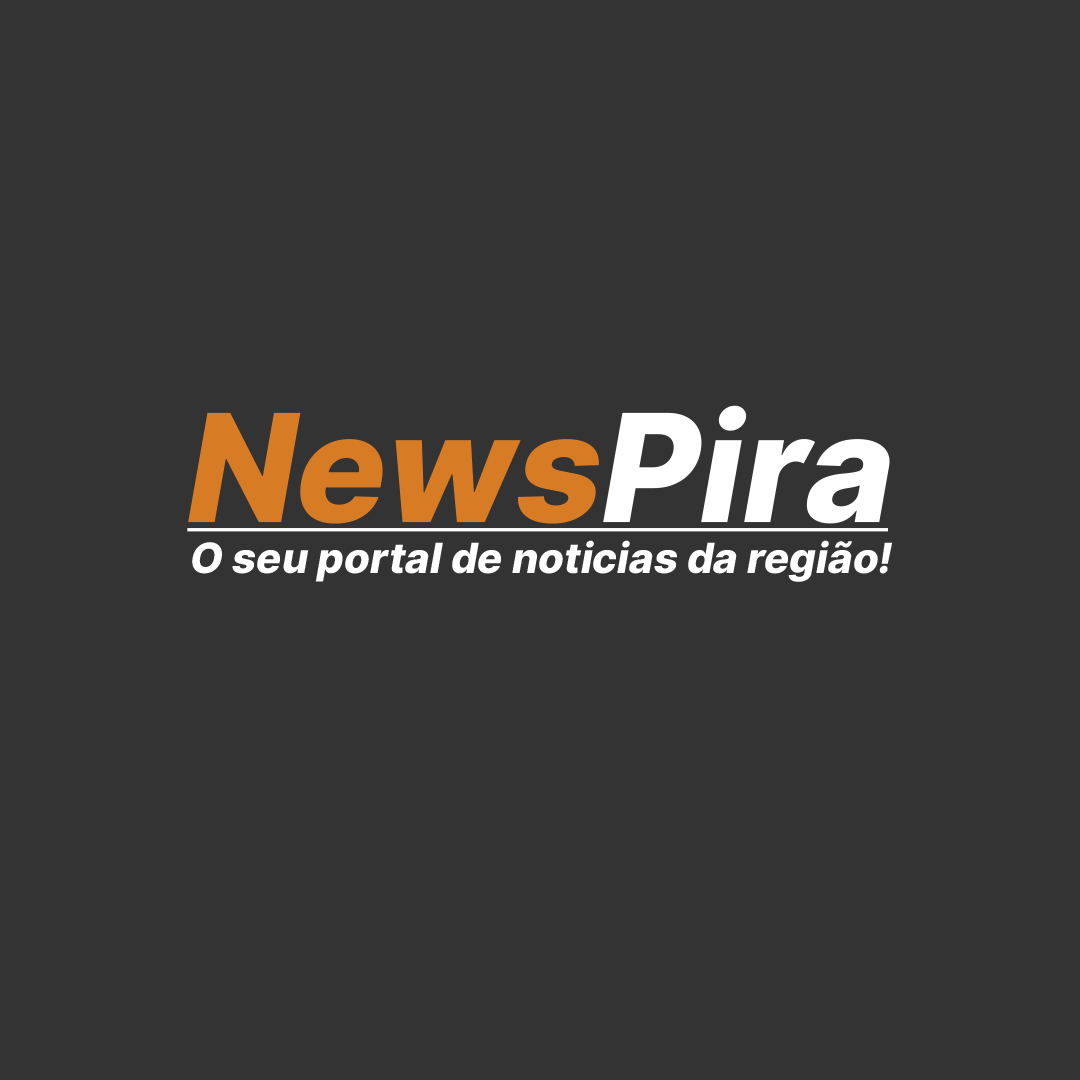
<style>
.page{position:relative;width:1080px;height:1080px;background:#333333}
.page>*{position:absolute;margin:0}
.t1{font:150.2px "Inter-ExtraBold";color:#d87b25;font-style:italic}
.t2{font:150.2px "Inter-ExtraBold";color:#ffffff;font-style:italic}
.t3{font:41.8px "Inter-ExtraBold";color:#ffffff;font-style:italic}
</style>
<div class="page">
<p class="t1" style="left:188px;top:405px;width:702px;height:119px">News<span class="t2">Pira</span></p>
<p class="t3" style="left:192px;top:540px;width:701px;height:42px">O seu portal de noticias da região!</p>
</div>
